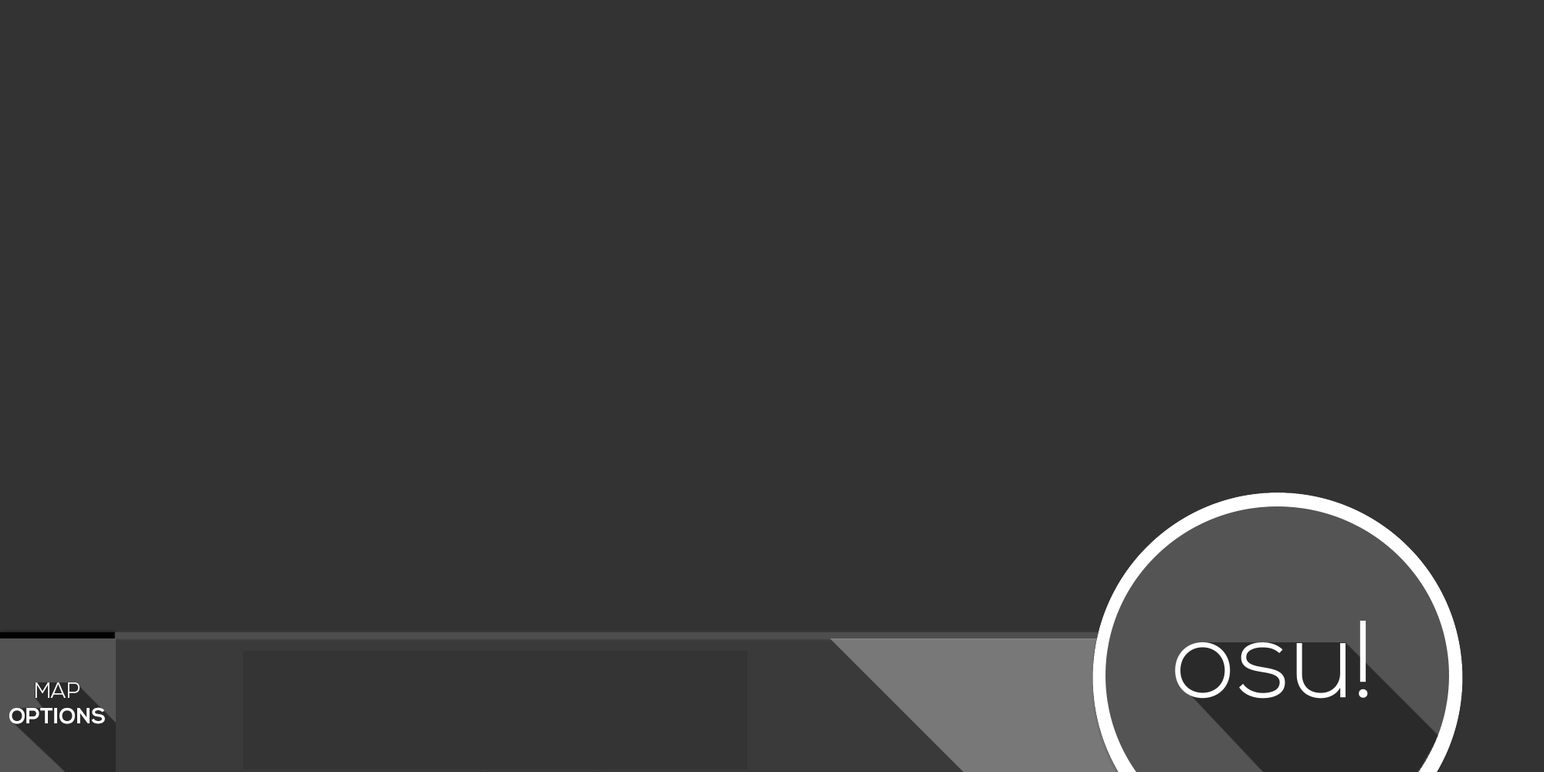
<style>
.page{position:relative;width:1544px;height:772px;background:#333333}
.page>*{position:absolute;margin:0}
.t1{font:21.6px "NexaBold";color:#ffffff}
.t2{font:21.6px "NexaLight";color:#ffffff}
</style>
<div class="page">
<p class="t1" style="left:9px;top:683px;width:96px;height:41px;text-align:center"><span class="t2">MAP<br></span>OPTIONS</p>
</div>
